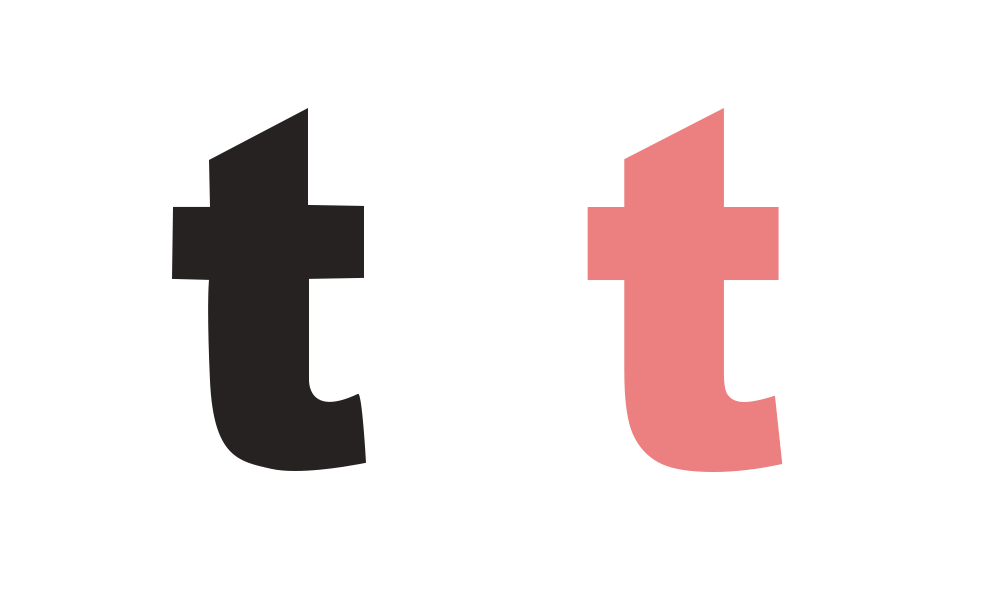
<style>
.page{position:relative;width:1000px;height:600px;background:#ffffff}
.page>*{position:absolute;margin:0}
.t1{font:500px "Arial-Black";color:#ec7f7f}
</style>
<div class="page">
<p class="t1" style="left:587px;top:108px;width:196px;height:364px">t</p>
</div>
